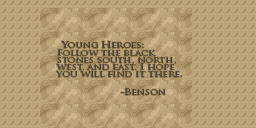
<style>
.page{position:relative;width:256px;height:128px;background:#bda57b}
.page>*{position:absolute;margin:0}
.t1{font:8.5px "TrajanPro-Regular";color:#4a3f2b;scale:1.15 1}
.t2{font:8.5px/7.1px "TrajanPro-Regular";color:#52452f;scale:1.15 1}
.t3{font:8.5px "TrajanPro-Regular";color:#52452f;scale:1.15 1}
</style>
<div class="page">
<p class="t1" style="left:61px;top:41px;width:83px;height:7px">Young Heroes:</p>
<p class="t2" style="left:56px;top:49px;width:126px;height:28px">Follow the black<br>stones south, north,<br>west, and east. I hope<br>you will find it there.</p>
<p class="t3" style="left:121px;top:88px;width:45px;height:7px">-Benson</p>
</div>
